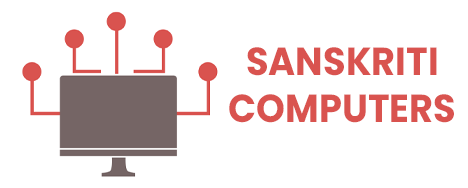
<style>
.page{position:relative;width:468px;height:188px;background:#ffffff}
.page>*{position:absolute;margin:0}
.t1{font:39px "Poppins-Bold";color:#d9534f;scale:0.94 1}
</style>
<div class="page">
<p class="t1" style="left:229px;top:47px;width:225px;height:76px;text-align:center">SANSKRITI<br>COMPUTERS</p>
</div>
